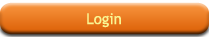
<style>
.page{position:relative;width:209px;height:37px}
.page>*{position:absolute;margin:0}
.t1{font:15px "TrebuchetMS";color:#f9f592}
</style>
<div class="page">
<p class="t1" style="left:87px;top:13px;width:34px;height:15px">Login</p>
</div>
